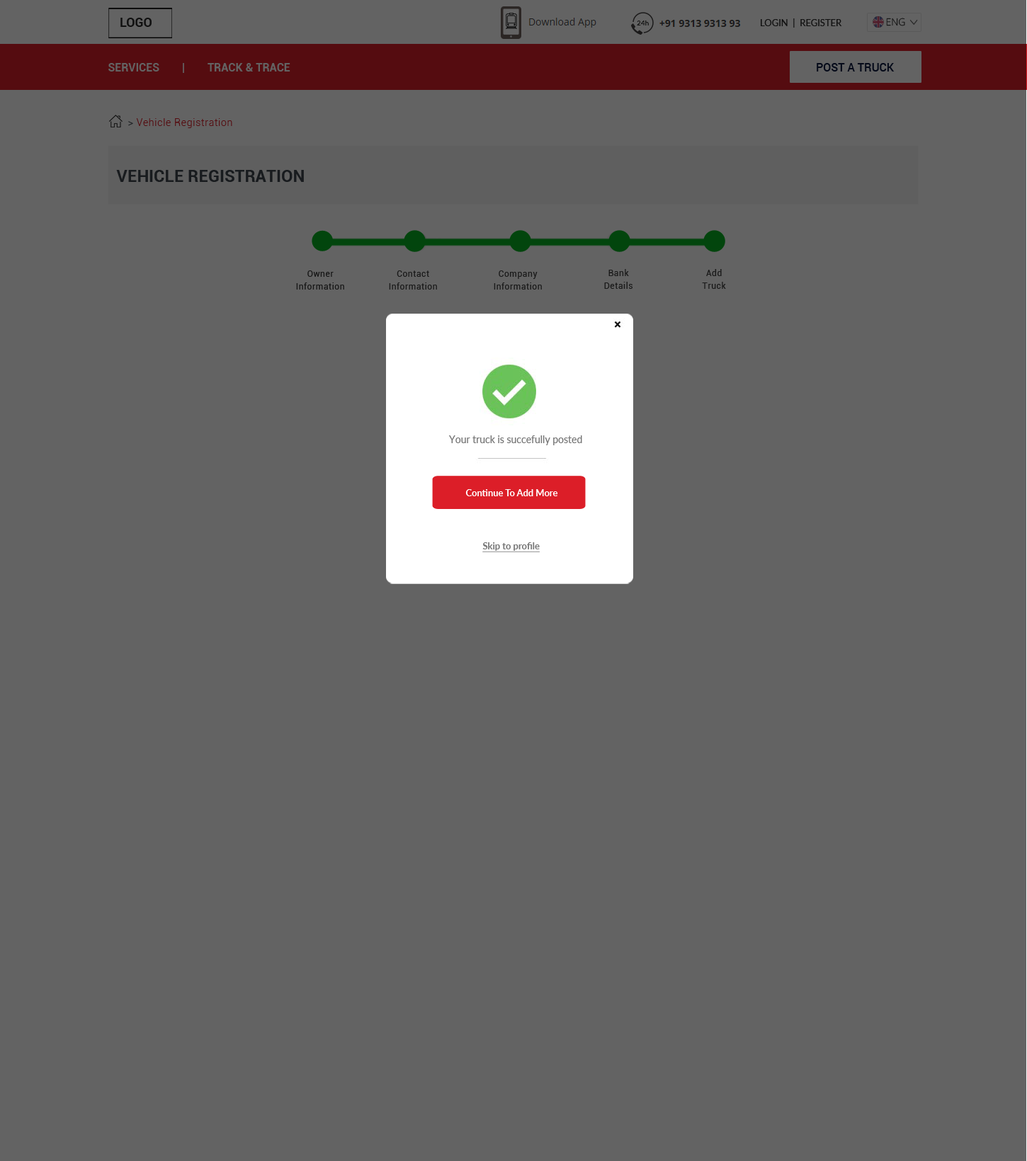
<style>
.page{position:relative;width:1027px;height:1161px;background:#636363}
.page>*{position:absolute;margin:0}
.t1{font:12.7px "Roboto-Bold";color:#111111}
.t2{font:9.9px "OpenSans-Light";color:#2c2c2c}
.t3{font:9.2px "Lato-Regular";color:#111111;text-transform:uppercase}
.t4{font:11.3px "Roboto-Bold";color:#636363;text-transform:uppercase}
.t5{font:11.3px "Roboto-Medium";color:#050a19}
.t6{font:9.9px "Roboto-Light";letter-spacing:0.05em;color:#550c10}
.t7{font:17px "Roboto-Bold";color:#181b1e;text-transform:uppercase}
.t8{font:8.5px/12.7px "Roboto-Regular";letter-spacing:0.05em;color:#1a1a1a}
.t9{font:8.5px/12.7px "Roboto-Regular";letter-spacing:0.05em;color:#171717}
.t10{font:9.9px "Lato-Regular";color:#777777}
.t11{font:9.2px "Lato-Bold";color:#ffffff}
.t12{font:9.2px "Lato-Bold";color:#777777;text-decoration:underline}
</style>
<div class="page">
<p class="t1" style="left:120px;top:18px;width:32px;height:9px">LOGO</p>
<p class="t2" style="left:886px;top:18px;width:19px;height:8px">ENG</p>
<p class="t3" style="left:761px;top:18px;width:81px;height:10px">Login  |  Register</p>
<p class="t4" style="left:108px;top:63px;width:182px;height:10px">Services        |        Track &amp; TraCe</p>
<p class="t5" style="left:816px;top:63px;width:78px;height:9px">POST A TRUCK</p>
<p class="t6" style="left:128px;top:118px;width:104px;height:10px">&gt; Vehicle Registration</p>
<p class="t7" style="left:116px;top:170px;width:188px;height:12px">Vehicle Registration</p>
<p class="t8" style="left:604px;top:269px;width:28px;height:20px;text-align:center">Bank<br>Details</p>
<p class="t8" style="left:702px;top:269px;width:24px;height:20px;text-align:center">Add<br>Truck</p>
<p class="t9" style="left:296px;top:271px;width:48px;height:19px;text-align:center">Owner<br>Information</p>
<p class="t8" style="left:389px;top:271px;width:48px;height:19px;text-align:center">Contact<br>Information</p>
<p class="t8" style="left:494px;top:271px;width:48px;height:19px;text-align:center">Company<br>Information</p>
<p class="t10" style="left:448px;top:435px;width:134px;height:10px">Your truck is succefully posted</p>
<p class="t11" style="left:465px;top:489px;width:93px;height:7px">Continue To Add More</p>
<p class="t12" style="left:482px;top:542px;width:58px;height:10px">Skip to profile</p>
</div>
